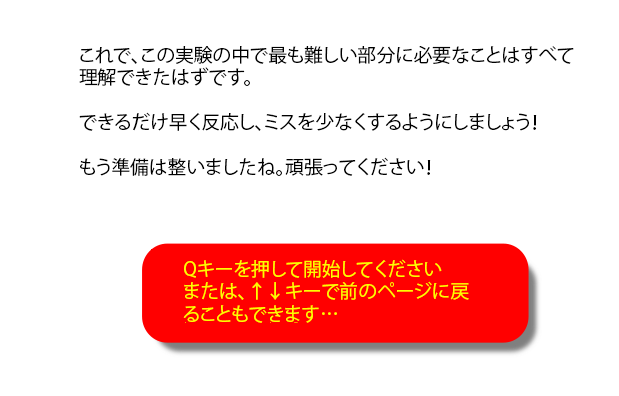
<style>
.page{position:relative;width:619px;height:396px;background:#ffffff}
.page>*{position:absolute;margin:0}
.t1{font:18.8px "KozGoPr6N-Regular";color:#000000}
.t2{font:18.8px "KozGoPr6N-Regular";color:#fcff00}
</style>
<div class="page">
<p class="t1" style="left:79px;top:46px;width:495px;height:130px">これで、この実験の中で最も難しい部分に必要なことはすべて<br>理解できたはずです。<br><br>できるだけ早く反応し、ミスを少なくするようにしましょう！<br><br>もう準備は整いましたね。頑張ってください！</p>
<p class="t2" style="left:183px;top:259px;width:286px;height:64px">Qキーを押して開始してください<br>または、↑↓キーで前のページに戻<br>ることもできます…</p>
</div>
